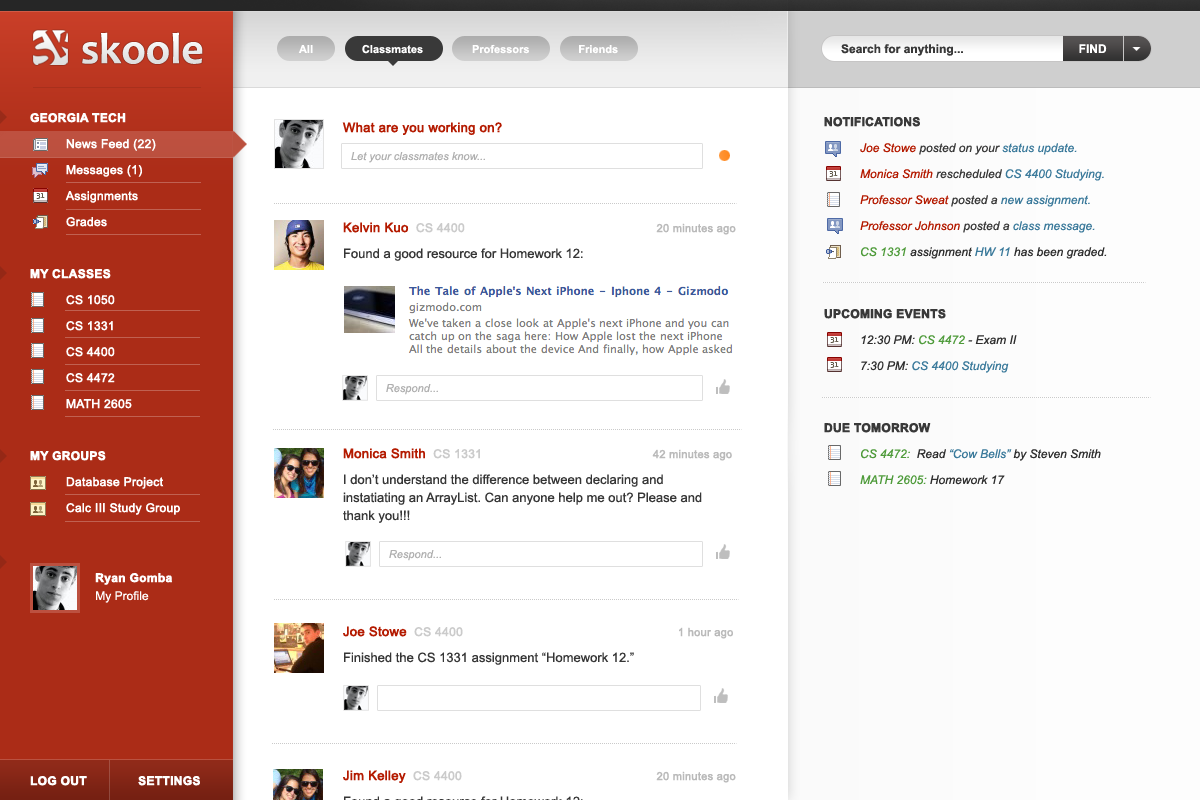
<style>
.page{position:relative;width:1200px;height:800px;background:#ffffff}
.page>*{position:absolute;margin:0}
.t1{font:43.6px "Candara-Bold";color:#ffffff}
.t2{font:11px "Arial-BoldMT";color:#ffffff}
.t3{font:12px "Arial-BoldMT";color:#393939}
.t4{font:12px "Arial-BoldMT";color:#ffffff}
.t5{font:12px/26px "ArialMT";color:#ffffff;font-weight:bold}
.t6{font:12px/26px "Arial-BoldMT";color:#ffffff;font-weight:bold}
.t7{font:12px/18px "Arial-BoldMT";color:#ffffff;font-weight:bold}
.t8{font:12px/18px "ArialMT";color:#ffffff}
.t9{font:12px/26px "Arial-ItalicMT";color:#2f2f2f}
.t10{font:12px/26px "Arial-BoldMT";color:#393939;font-weight:bold}
.t11{font:12px/26px "Arial-ItalicMT";color:#b41a00}
.t12{font:12px/26px "Arial-ItalicMT";color:#393939}
.t13{font:12px/26px "Arial-ItalicMT";color:#3b7a9b}
.t14{font:12px/26px "Arial-ItalicMT";color:#4f9b3b}
</style>
<div class="page">
<p class="t1" style="left:82px;top:32px;width:121px;height:32px">skoole</p>
<p class="t2" style="left:298px;top:44px;width:320px;height:10px">All                Classmates                Professors                Friends</p>
<p class="t3" style="left:841px;top:44px;width:266px;height:12px">Search for anything...         <span class="t4">FIND</span></p>
<p class="t5" style="left:30px;top:113px;width:170px;height:673px"><span class="t6">GEORGIA TECH<br> </span>News Feed (22)<br> Messages (1)<br> Assignments<br> Grades<br><br><span class="t6">MY CLASSES<br></span> CS 1050<br> CS 1331<br> CS 4400<br> CS 4472<br> MATH 2605<br><br><span class="t6">MY GROUPS<br> </span>Database Project<br> Calc III Study Group<br><br>         <br>         <span class="t7">Ryan Gomba<br>         </span><span class="t8">My Profile<br><br><br><br><br><br><br><br><br>  <br></span><span class="t7">LOG OUT              SETTINGS</span></p>
<p class="t9" style="left:824px;top:117px;width:283px;height:368px"><span class="t10">NOTIFICATIONS<br></span><span class="t11"> Joe Stowe </span><span class="t12">posted on your </span><span class="t13">status update.<br></span><span class="t11"> Monica Smith</span><span class="t12"> rescheduled </span><span class="t13">CS 4400 Studying.<br></span><span class="t11"> Professor Sweat</span><span class="t12"> posted a </span><span class="t13">new assignment.<br></span><span class="t11"> Professor Johnson</span><span class="t12"> posted a </span><span class="t13">class message.<br> </span><span class="t14">CS 1331 </span>assignment <span class="t13">HW 11 </span>has been graded.<br>  <br><span class="t10">UPCOMING EVENTS<br></span> 12:30 PM: <span class="t14">CS 4472 </span>- Exam II<br> 7:30 PM: <span class="t13">CS 4400 Studying<br>  <br></span><span class="t10">DUE TOMORROW<br></span><span class="t14"> CS 4472:  </span>Read <span class="t13">“Cow Bells” </span>by Steven Smith<br><span class="t14"> MATH 2605:</span> Homework 17</p>
</div>
